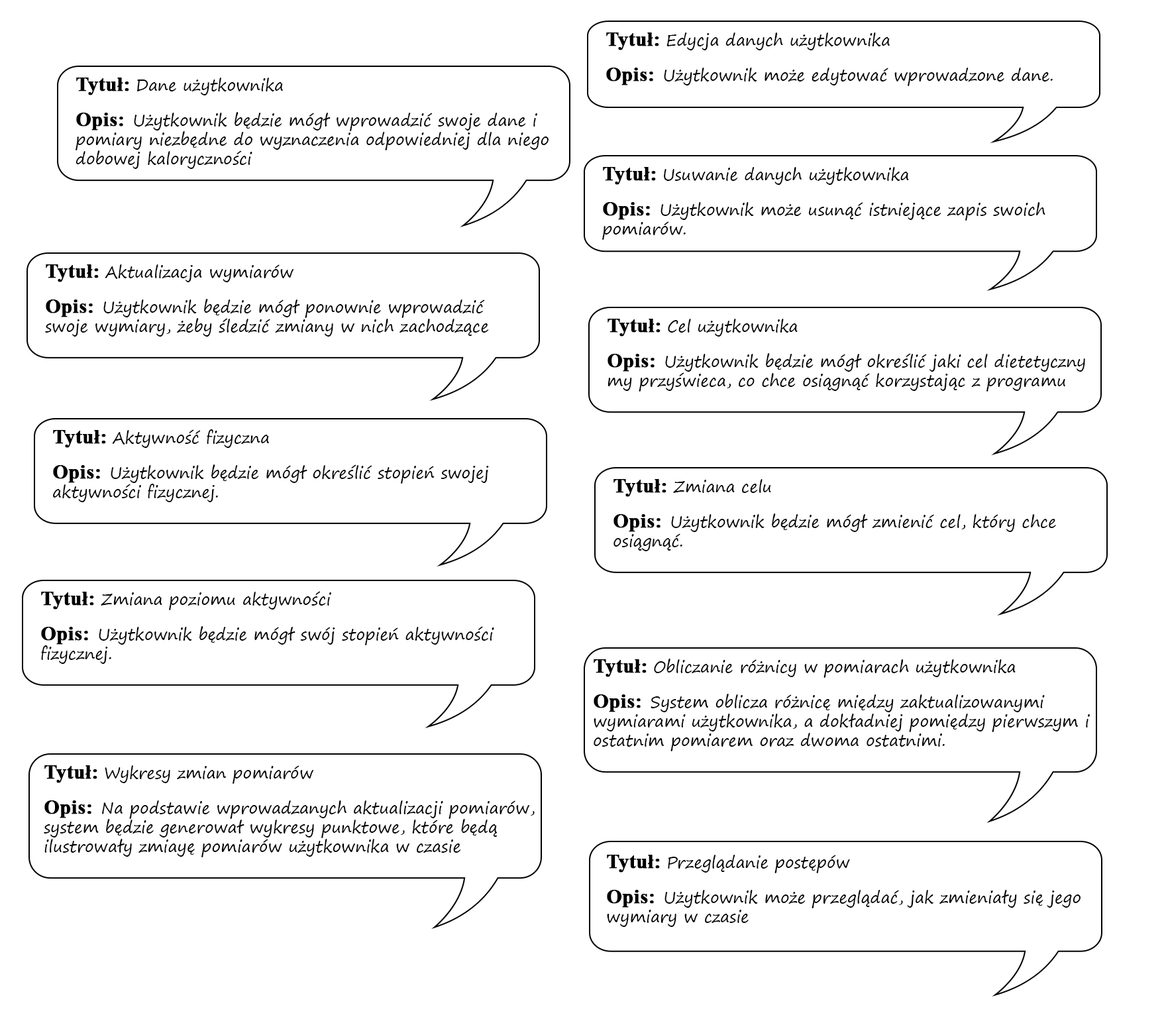
<style>
.page{position:relative;width:1166px;height:1023px;background:#ffffff}
.page>*{position:absolute;margin:0}
.t1{font:15.9px "SegoePrint";color:#000000}
.t2{font:19.9px "TimesNewRomanPS-BoldMT";color:#000000;font-weight:bold}
</style>
<div class="page">
<p class="t1" style="left:606px;top:32px;width:447px;height:54px"><span class="t2">Tytuł: </span>Edycja danych użytkownika<br><br><span class="t2">Opis:  </span>Użytkownik może edytować wprowadzone dane.</p>
<p class="t1" style="left:76px;top:78px;width:472px;height:91px"><span class="t2">Tytuł: </span>Dane użytkownika<br><br><span class="t2">Opis:  </span>Użytkownik będzie mógł wprowadzić swoje dane i pomiary niezbędne do wyznaczenia odpowiedniej dla niego dobowej kaloryczności</p>
<p class="t1" style="left:602px;top:167px;width:443px;height:73px"><span class="t2">Tytuł: </span>Usuwanie danych użytkownika<br><br><span class="t2">Opis:  </span>Użytkownik może usunąć istniejące zapis swoich pomiarów.</p>
<p class="t1" style="left:45px;top:264px;width:444px;height:73px"><span class="t2">Tytuł: </span>Aktualizacja wymiarów<br><br><span class="t2">Opis:  </span>Użytkownik będzie mógł ponownie wprowadzić swoje wymiary, żeby śledzić zmiany w nich zachodzące</p>
<p class="t1" style="left:607px;top:319px;width:478px;height:72px"><span class="t2">Tytuł: </span>Cel użytkownika<br><br><span class="t2">Opis:  </span>Użytkownik będzie mógł określić jaki cel dietetyczny my przyświeca, co chce osiągnąć korzystając z programu</p>
<p class="t1" style="left:53px;top:429px;width:436px;height:73px"><span class="t2">Tytuł: </span>Aktywność fizyczna<br><br><span class="t2">Opis:  </span>Użytkownik będzie mógł określić stopień swojej aktywności fizycznej.</p>
<p class="t1" style="left:613px;top:479px;width:443px;height:72px"><span class="t2">Tytuł: </span>Zmiana celu<br><br><span class="t2">Opis:  </span>Użytkownik będzie mógł zmienić cel, który chce osiągnąć.</p>
<p class="t1" style="left:41px;top:591px;width:453px;height:73px"><span class="t2">Tytuł: </span>Zmiana poziomu aktywności<br><br><span class="t2">Opis:  </span>Użytkownik będzie mógł swój stopień aktywności fizycznej.</p>
<p class="t1" style="left:594px;top:658px;width:496px;height:93px"><span class="t2">Tytuł: </span>Obliczanie różnicy w pomiarach użytkownika<br><br><span class="t2">Opis:  </span>System oblicza różnicę między zaktualizowanymi wymiarami użytkownika, a dokładniej pomiędzy pierwszym i ostatnim pomiarem oraz dwoma ostatnimi.</p>
<p class="t1" style="left:44px;top:765px;width:491px;height:92px"><span class="t2">Tytuł: </span>Wykresy zmian pomiarów<br><br><span class="t2">Opis:  </span>Na podstawie wprowadzanych aktualizacji pomiarów, system będzie generował wykresy punktowe, które będą ilustrowały zmiayę pomiarów użytkownika w czasie</p>
<p class="t1" style="left:607px;top:855px;width:473px;height:72px"><span class="t2">Tytuł: </span>Przeglądanie postępów<br><br><span class="t2">Opis:  </span>Użytkownik może przeglądać, jak zmieniały się jego wymiary w czasie</p>
</div>
